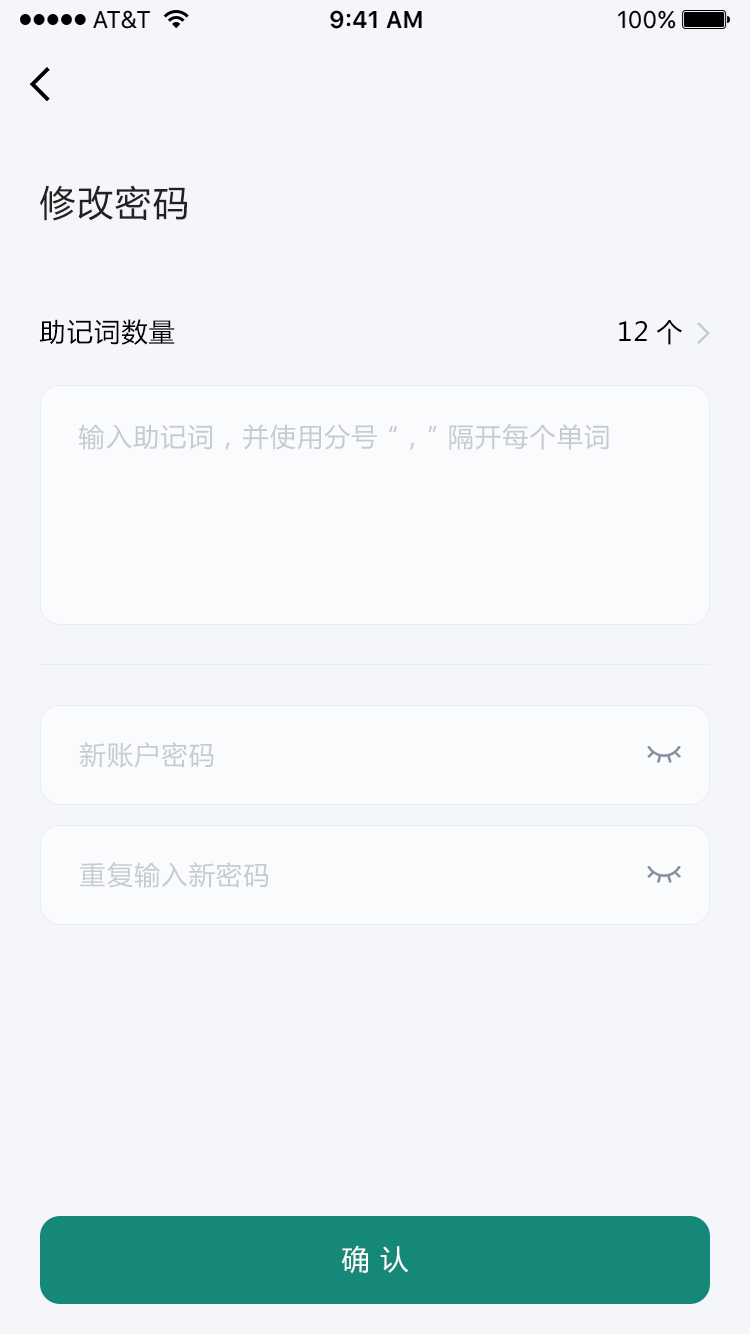
<style>
.page{position:relative;width:750px;height:1334px;background:#f5f6fa}
.page>*{position:absolute;margin:0}
.t1{font:36px "MicrosoftYaHei";letter-spacing:0.05em;color:#222222}
.t2{font:26px "MicrosoftYaHei";letter-spacing:0.05em;color:#000000}
.t3{font:26px "MicrosoftYaHei";letter-spacing:0.05em;color:#c8cad2}
.t4{font:28px "MicrosoftYaHei";letter-spacing:0.05em;color:#ffffff}
</style>
<div class="page">
<p class="t1" style="left:40px;top:185px;width:147px;height:36px">修改密码</p>
<p class="t2" style="left:39px;top:319px;width:136px;height:26px">助记词数量</p>
<p class="t2" style="left:619px;top:320px;width:63px;height:25px">12个</p>
<p class="t3" style="left:79px;top:424px;width:530px;height:26px">输入助记词，并使用分号“，”隔开每个单词</p>
<p class="t3" style="left:79px;top:742px;width:135px;height:26px">新账户密码</p>
<p class="t3" style="left:80px;top:862px;width:189px;height:26px">重复输入新密码</p>
<p class="t4" style="left:341px;top:1245px;width:68px;height:29px">确 认</p>
</div>
